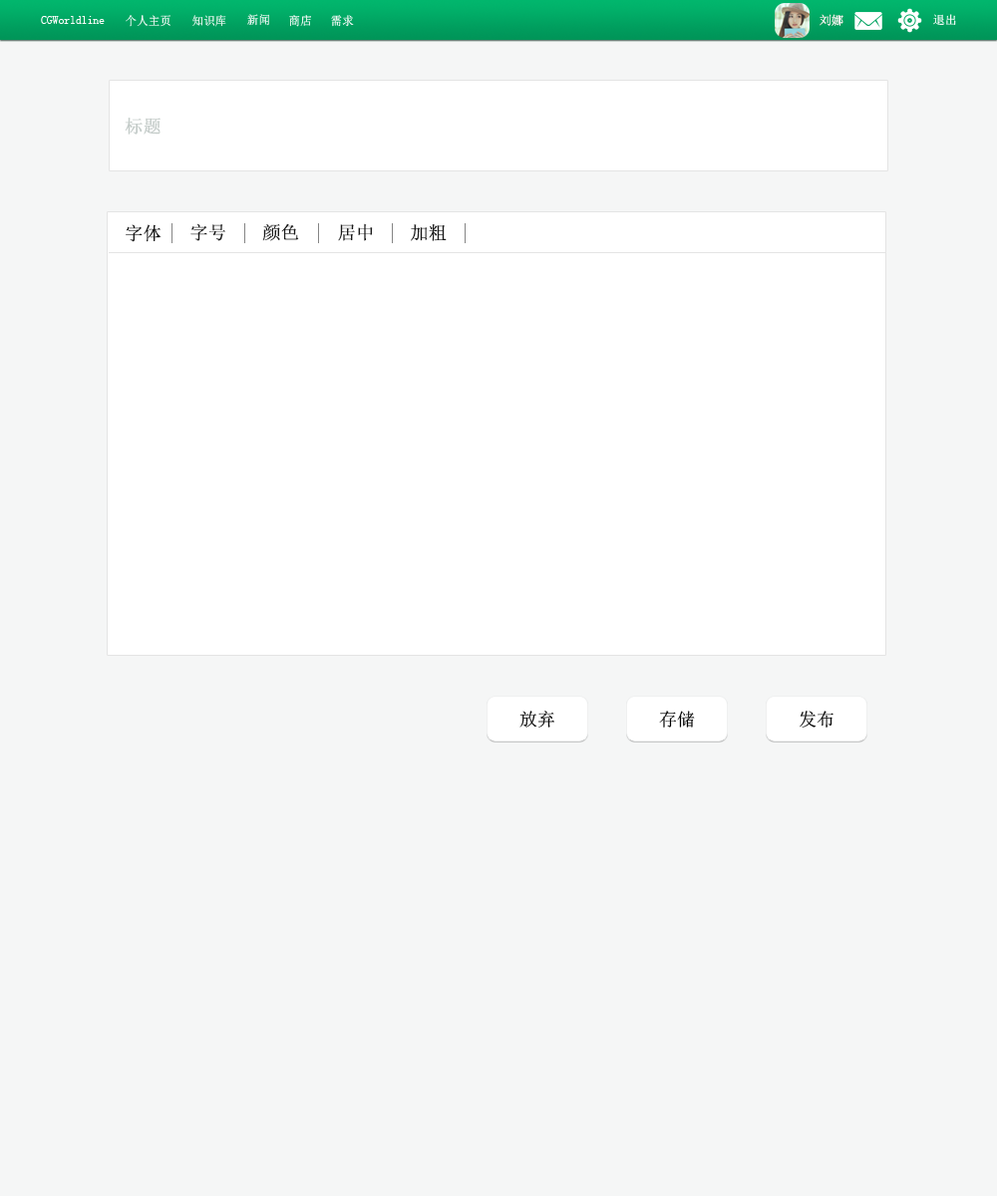
<style>
.page{position:relative;width:997px;height:1196px;background:#f5f6f6}
.page>*{position:absolute;margin:0}
.t1{font:12px "SimSun";color:#fdfcfc;scale:0.97 1}
.t2{font:12px "SimSun";scale:0.97 1}
.t3{font:12px "SimSun";color:#fdfbfb}
.t4{font:12px "SimSun";color:#ffffff}
.t5{font:17.9px "SimSun";color:#c4ccc9;font-weight:bold}
.t6{font:17.9px "SimSun";color:#191919;font-weight:bold}
.t7{font:17.9px "SimSun";color:#020202}
</style>
<div class="page">
<p class="t1" style="left:41px;top:16px;width:64px;height:8px">CGWorldline</p>
<p class="t2" style="left:126px;top:15px;width:44px;height:12px">个人主页</p>
<p class="t2" style="left:192px;top:15px;width:34px;height:12px">知识库</p>
<p class="t2" style="left:247px;top:14px;width:22px;height:12px">新闻</p>
<p class="t2" style="left:289px;top:15px;width:22px;height:12px">商店</p>
<p class="t2" style="left:331px;top:15px;width:23px;height:12px">需求</p>
<p class="t3" style="left:819px;top:14px;width:24px;height:12px">刘娜</p>
<p class="t4" style="left:933px;top:14px;width:23px;height:11px">退出</p>
<p class="t5" style="left:125px;top:118px;width:35px;height:17px">标题</p>
<p class="t6" style="left:126px;top:224px;width:35px;height:18px">字体</p>
<p class="t6" style="left:190px;top:223px;width:35px;height:18px">字号</p>
<p class="t6" style="left:262px;top:223px;width:37px;height:18px">颜色</p>
<p class="t6" style="left:338px;top:223px;width:35px;height:18px">居中</p>
<p class="t6" style="left:411px;top:224px;width:36px;height:17px">加粗</p>
<p class="t7" style="left:519px;top:711px;width:35px;height:17px">放弃</p>
<p class="t7" style="left:659px;top:711px;width:36px;height:17px">存储</p>
<p class="t7" style="left:799px;top:711px;width:34px;height:17px">发布</p>
</div>
